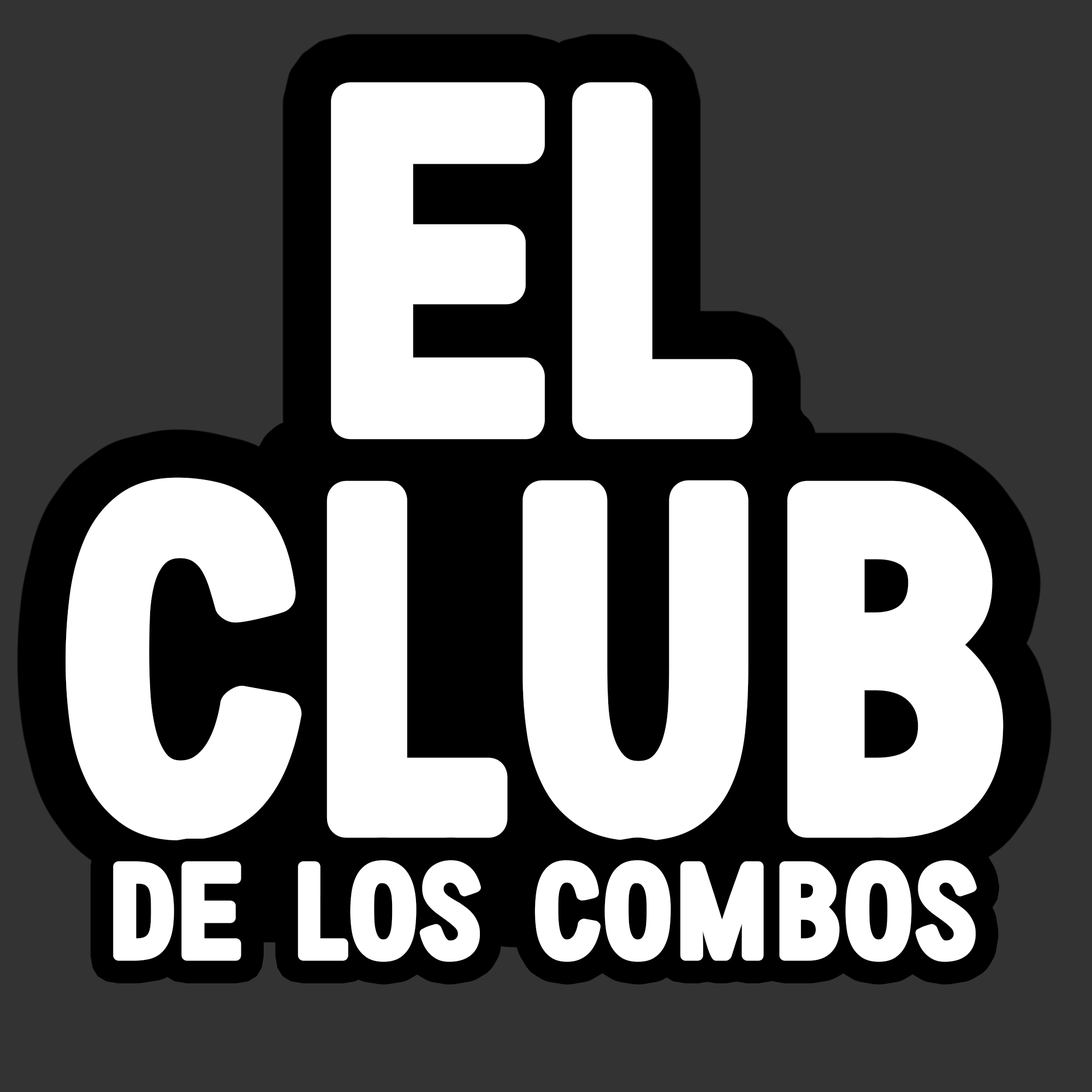
<style>
.page{position:relative;width:1092px;height:1092px;background:#333333}
.page>*{position:absolute;margin:0}
.t1{font:491.4px/398.6px "FFF-Bold";color:#ffffff;font-weight:bold}
.t2{font:136.5px "FFF-Bold";color:#ffffff;font-weight:bold}
</style>
<div class="page">
<p class="t1" style="left:66px;top:82px;width:938px;height:759px;text-align:center">El<br>club</p>
<p class="t2" style="left:113px;top:860px;width:864px;height:102px">de los combos</p>
</div>
